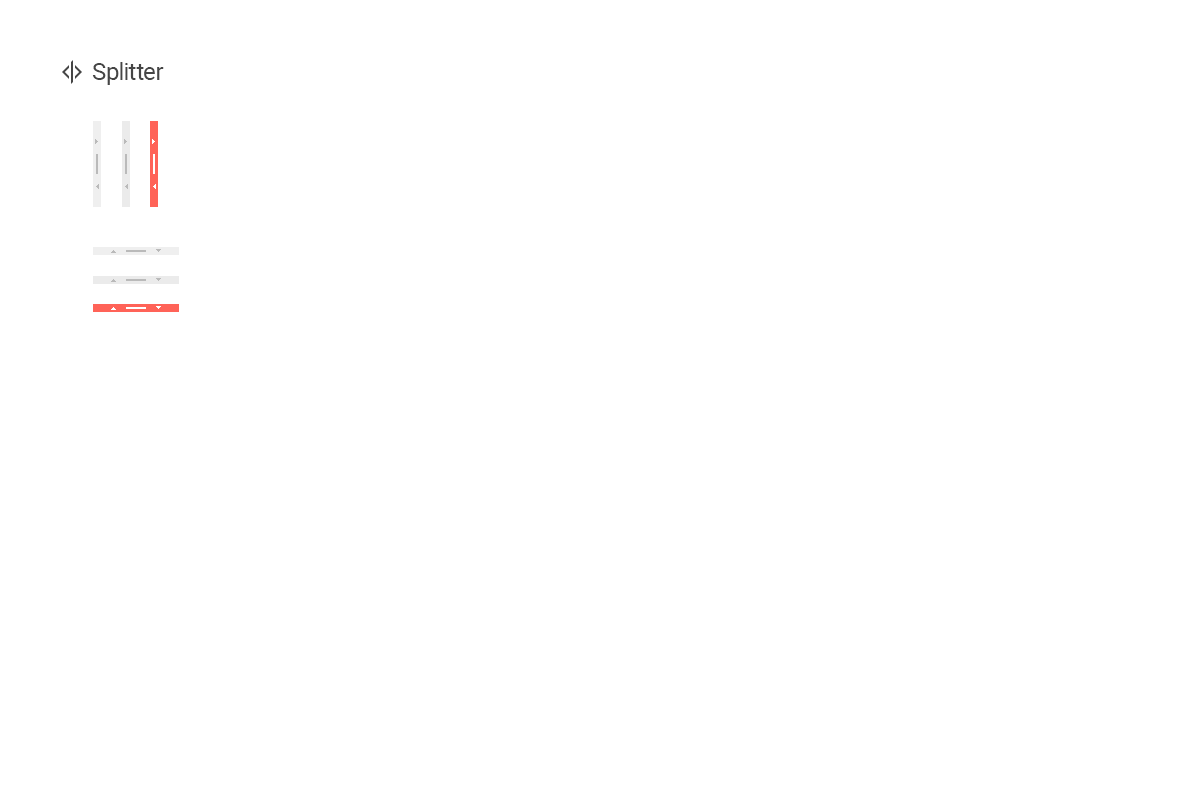
<style>
.page{position:relative;width:1200px;height:800px;background:#ffffff}
.page>*{position:absolute;margin:0}
.t1{font:24px "Roboto-Regular";letter-spacing:-0.025em;color:#454545}
</style>
<div class="page">
<p class="t1" style="left:92px;top:62px;width:72px;height:23px">Splitter</p>
</div>
